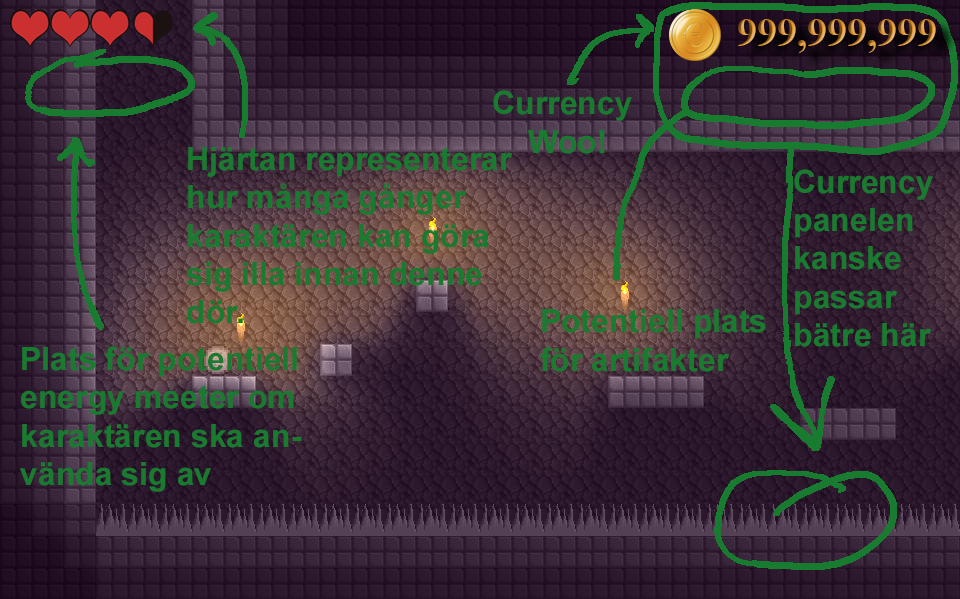
<style>
.page{position:relative;width:960px;height:599px}
.page>*{position:absolute;margin:0}
.t1{font:40px "TimesNewRomanPS-BoldMT"}
.t2{font:32px "Arial-BoldMT";color:#197b30}
</style>
<div class="page">
<p class="t1" style="left:738px;top:19px;width:198px;height:34px">999,999,999</p>
<p class="t2" style="left:493px;top:90px;width:139px;height:64px">Currency<br>Woo!</p>
<p class="t2" style="left:186px;top:147px;width:326px;height:177px">Hjärtan representerar hur många gånger karaktären kan göra sig illa innan denne dör.</p>
<p class="t2" style="left:794px;top:169px;width:139px;height:178px">Currency<br>panelen kanske passar bätre här nere?</p>
<p class="t2" style="left:540px;top:309px;width:226px;height:63px">Potentiell plats för artifakter</p>
<p class="t2" style="left:20px;top:346px;width:282px;height:146px">Plats för potentiell energy meeter om karaktären ska använda sig av sådant.</p>
</div>
